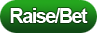
<style>
.page{position:relative;width:97px;height:33px;background:#ffffff}
.page>*{position:absolute;margin:0}
.t1{font:20px "Arial-BoldMT";letter-spacing:-0.08em;color:#ffffff}
</style>
<div class="page">
<p class="t1" style="left:10px;top:8px;width:78px;height:15px">Raise/Bet</p>
</div>
